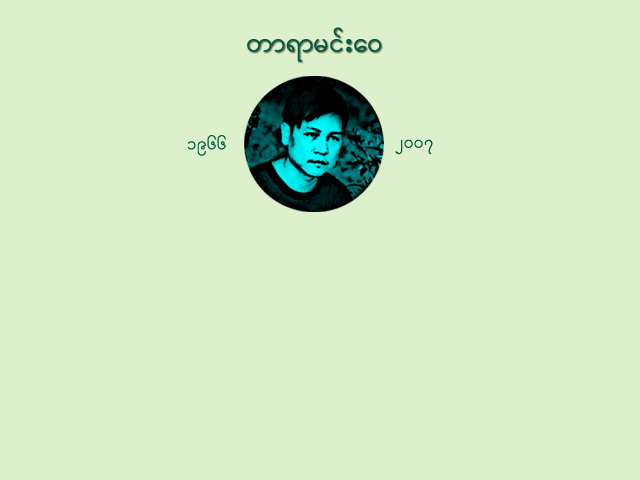
<style>
.page{position:relative;width:640px;height:480px;background:#dcf1cb}
.page>*{position:absolute;margin:0}
.t1{font:36px "WinInwaNormal";color:#00593d}
.t2{font:23px "WinInwaNormal";color:#00593d}
</style>
<div class="page">
<p class="t1" style="left:247px;top:27px;width:134px;height:35px">wm&amp;mrif;a0</p>
<p class="t2" style="left:187px;top:135px;width:39px;height:21px">1966</p>
<p class="t2" style="left:395px;top:139px;width:38px;height:16px">2007</p>
</div>
